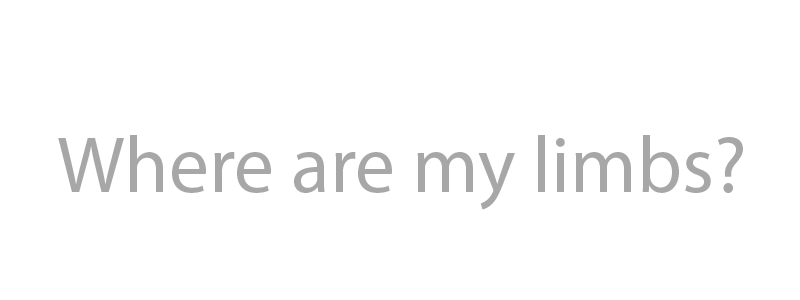
<style>
.page{position:relative;width:800px;height:300px;background:#ffffff}
.page>*{position:absolute;margin:0}
.t1{font:80px "MyriadPro-Regular";color:#a7a7a7}
</style>
<div class="page">
<p class="t1" style="left:58px;top:135px;width:685px;height:75px">Where are my limbs?</p>
</div>
